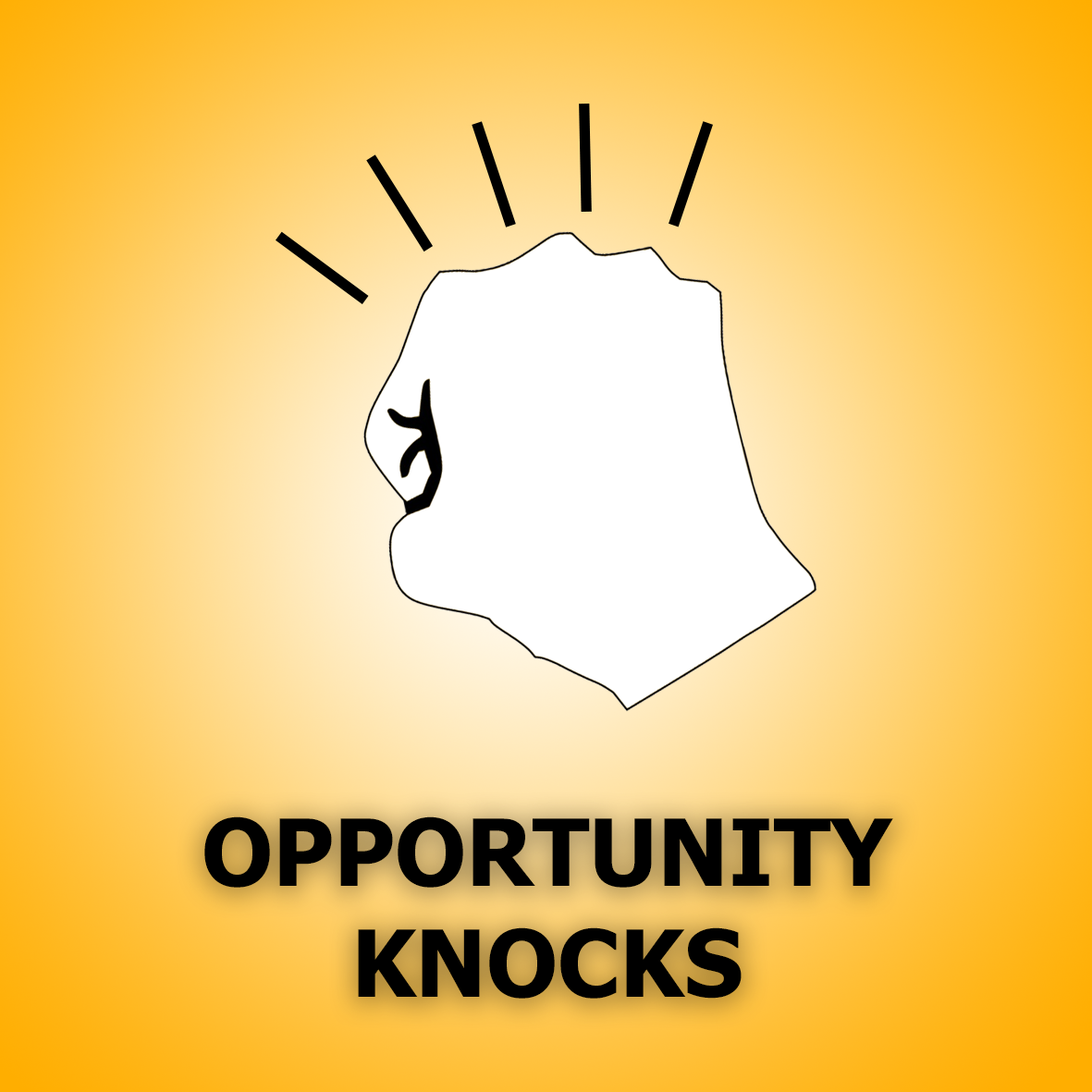
<style>
.page{position:relative;width:1092px;height:1092px}
.page>*{position:absolute;margin:0}
.t1{font:92.5px "Tahoma-Bold";color:#000000}
</style>
<div class="page">
<p class="t1" style="left:204px;top:816px;width:689px;height:183px;text-align:center">OPPORTUNITY KNOCKS</p>
</div>
